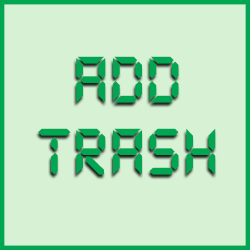
<style>
.page{position:relative;width:250px;height:250px;background:#d6f1d3}
.page>*{position:absolute;margin:0}
.t1{font:72px/72px "DS-Digital-Bold";color:#00a651}
</style>
<div class="page">
<p class="t1" style="left:38px;top:56px;width:178px;height:119px;text-align:center">add<br>trash</p>
</div>
